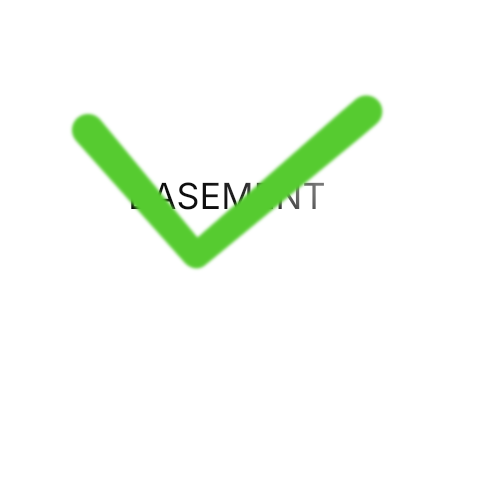
<style>
.page{position:relative;width:480px;height:480px;background:#ffffff}
.page>*{position:absolute;margin:0}
.t1{font:36px "Inter-Regular"}
</style>
<div class="page">
<p class="t1" style="left:130px;top:182px;width:195px;height:29px">BASEMENT</p>
</div>
